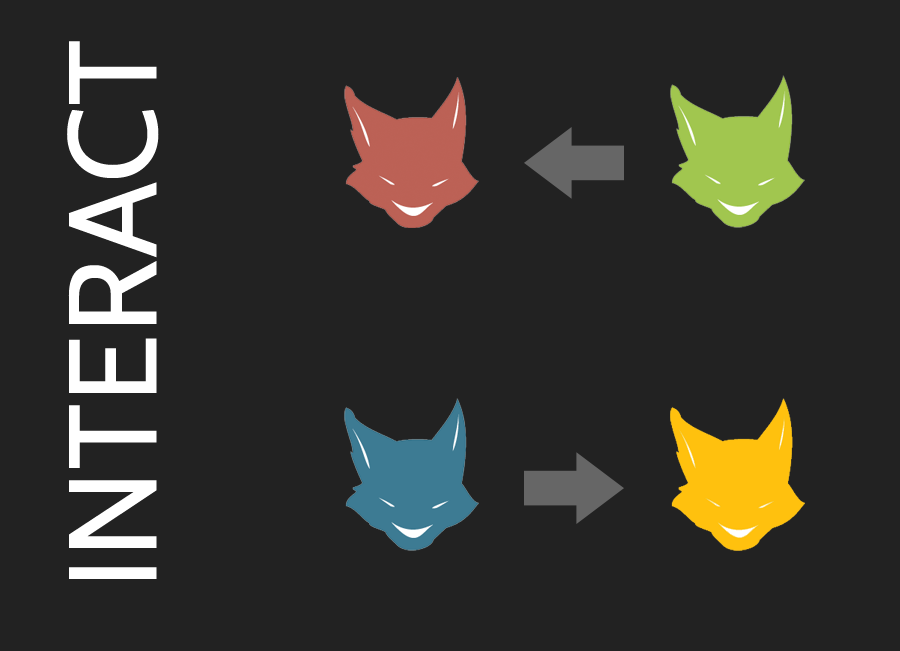
<style>
.page{position:relative;width:900px;height:651px;background:#222222}
.page>*{position:absolute;margin:0}
.t1{font:125px "Cabin-Regular";color:#ffffff}
</style>
<div class="page">
<p class="t1" style="left:67px;top:41px;width:92px;height:538px;rotate:-90deg">INTERACT</p>
</div>
